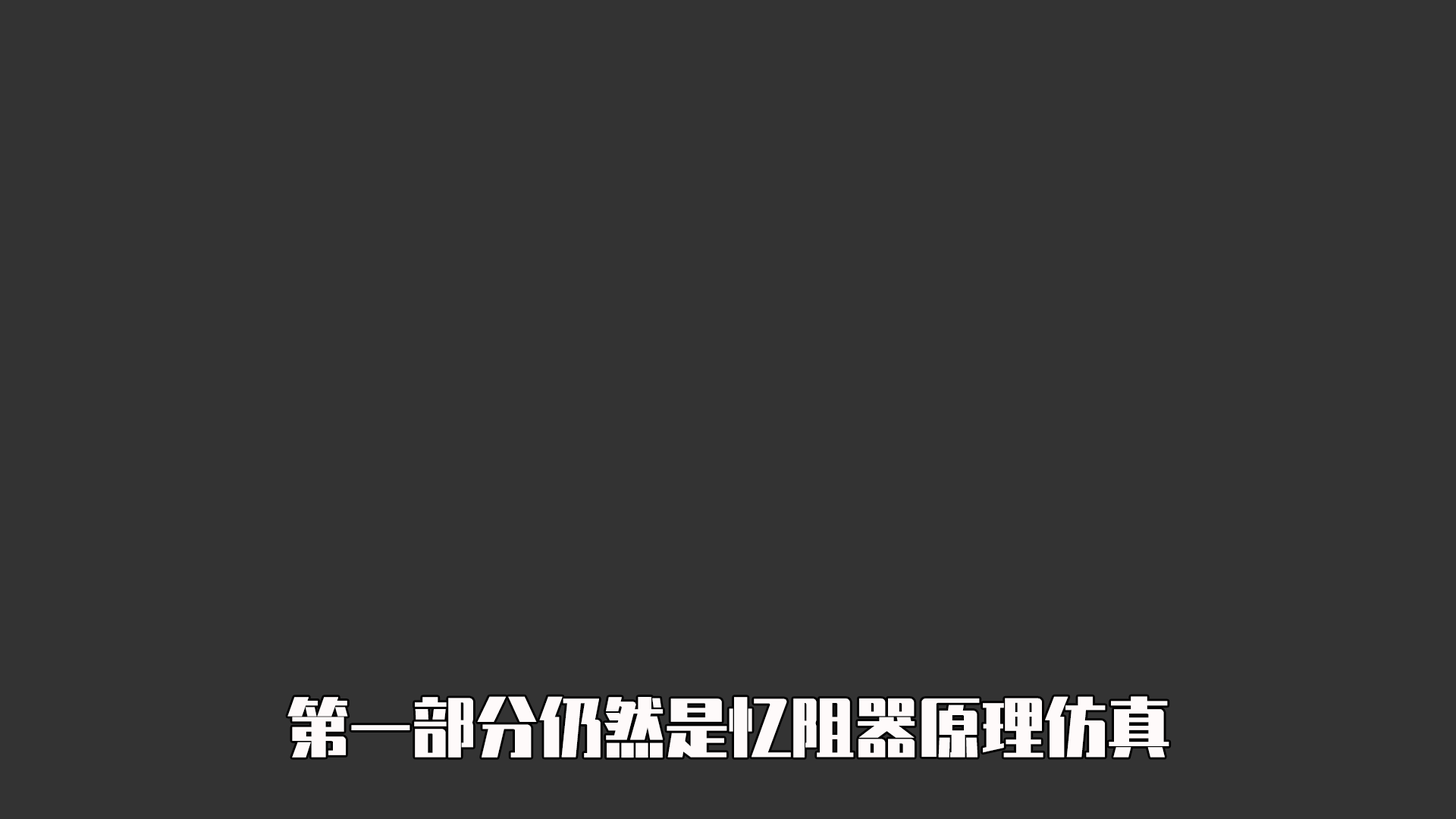
<style>
.page{position:relative;width:1456px;height:819px;background:#333333}
.page>*{position:absolute;margin:0}
.t1{font:63.2px "ZhenyanGB-Regular";color:#fefafa}
</style>
<div class="page">
<p class="t1" style="left:287px;top:696px;width:882px;height:62px">第一部分仍然是忆阻器原理仿真</p>
</div>
